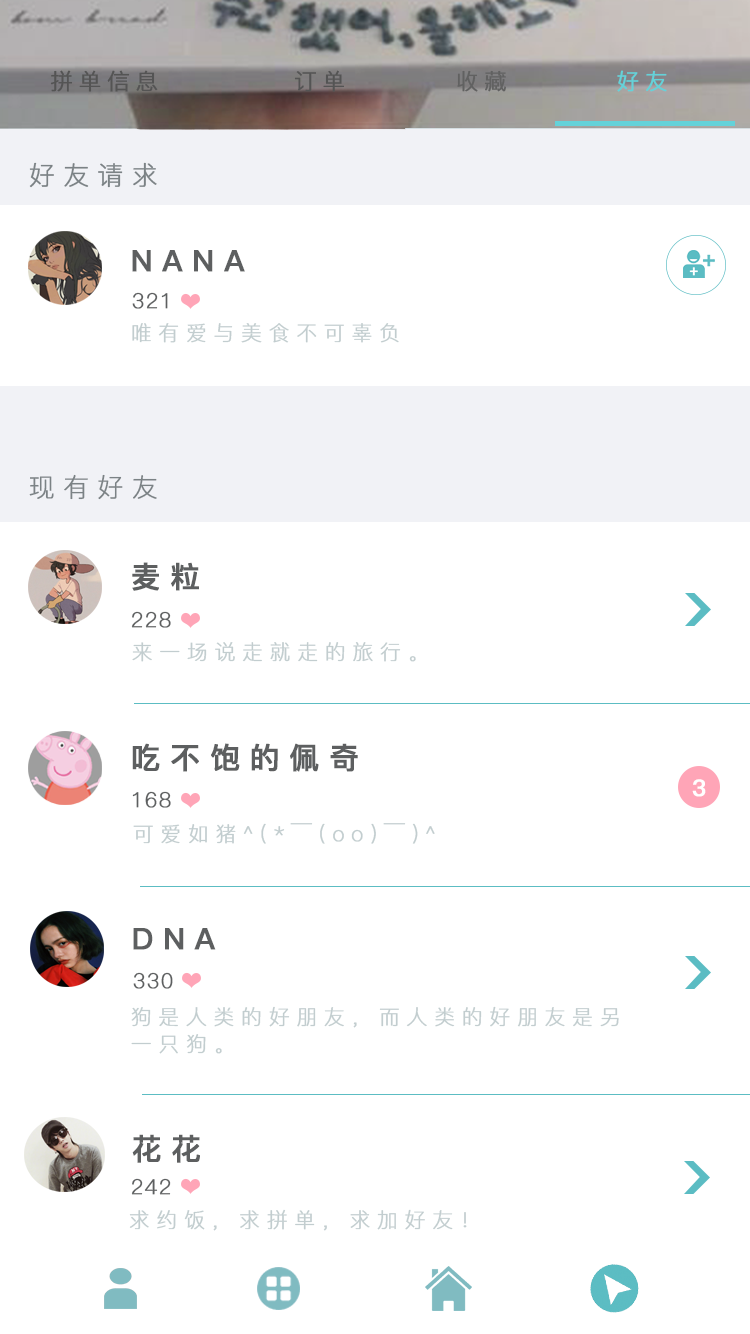
<style>
.page{position:relative;width:750px;height:1334px;background:#ffffff}
.page>*{position:absolute;margin:0}
.t1{font:22.2px "PingFang-SC-Regular";letter-spacing:0.252em;color:#545454;font-weight:bold}
.t2{font:22.2px "PingFang-SC-Regular";letter-spacing:0.252em;color:#616161;font-weight:bold}
.t3{font:22.2px "PingFang-SC-Regular";letter-spacing:0.252em;color:#64d2d9;font-weight:bold}
.t4{font:25.6px "PingFang-SC-Light";letter-spacing:0.314em;color:#7b8286;font-weight:bold}
.t5{font:29.6px "PingFang-SC-Bold";letter-spacing:0.314em;color:#5d5f60;font-weight:bold}
.t6{font:20.6px "PingFang-SC-Light";letter-spacing:0.054em;color:#5d5f60;font-weight:bold}
.t7{font:20.6px "PingFang-SC-Light";letter-spacing:0.314em;color:#c2cdcf;font-weight:bold}
.t8{font:23px "PingFang-SC-Bold";letter-spacing:0.314em;color:#ffffff;font-weight:bold}
.t9{font:20.6px/26.6px "PingFang-SC-Light";letter-spacing:0.314em;color:#c2cdcf;font-weight:bold}
</style>
<div class="page">
<p class="t1" style="left:50px;top:70px;width:108px;height:22px">拼单信息</p>
<p class="t1" style="left:294px;top:70px;width:51px;height:22px">订单</p>
<p class="t2" style="left:457px;top:70px;width:49px;height:22px">收藏</p>
<p class="t3" style="left:617px;top:70px;width:50px;height:22px">好友</p>
<p class="t4" style="left:29px;top:162px;width:128px;height:26px">好友请求</p>
<p class="t5" style="left:132px;top:250px;width:113px;height:22px">NANA</p>
<p class="t6" style="left:132px;top:292px;width:36px;height:17px">321</p>
<p class="t7" style="left:132px;top:323px;width:267px;height:20px">唯有爱与美食不可辜负</p>
<p class="t4" style="left:29px;top:474px;width:128px;height:26px">现有好友</p>
<p class="t5" style="left:132px;top:562px;width:67px;height:29px">麦粒</p>
<p class="t6" style="left:131px;top:611px;width:40px;height:17px">228</p>
<p class="t7" style="left:132px;top:642px;width:284px;height:20px">来一场说走就走的旅行。</p>
<p class="t5" style="left:132px;top:743px;width:226px;height:29px">吃不饱的佩奇</p>
<p class="t8" style="left:692px;top:779px;width:14px;height:18px">3</p>
<p class="t6" style="left:132px;top:791px;width:39px;height:17px">168</p>
<p class="t7" style="left:133px;top:823px;width:302px;height:21px">可爱如猪^(*￣(oo)￣)^</p>
<p class="t5" style="left:133px;top:928px;width:83px;height:22px">DNA</p>
<p class="t6" style="left:133px;top:972px;width:40px;height:17px">330</p>
<p class="t9" style="left:131px;top:1006px;width:488px;height:48px">狗是人类的好朋友，而人类的好朋友是另<br>一只狗。</p>
<p class="t5" style="left:132px;top:1134px;width:68px;height:29px">花花</p>
<p class="t6" style="left:131px;top:1178px;width:40px;height:17px">242</p>
<p class="t7" style="left:129px;top:1209px;width:338px;height:22px">求约饭，求拼单，求加好友！</p>
</div>
